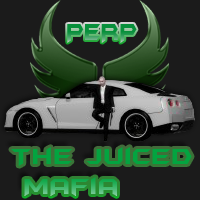
<style>
.page{position:relative;width:200px;height:200px;background:#1b1b1b}
.page>*{position:absolute;margin:0}
.t1{font:26px "BatmanForeverAlternate";color:#08903b;scale:0.82 1}
.t2{font:24.9px "BatmanForeverAlternate"}
</style>
<div class="page">
<p class="t1" style="left:67px;top:24px;width:70px;height:19px">PERP</p>
<p class="t2" style="left:11px;top:147px;width:181px;height:49px">The Juiced<br> MAfia</p>
</div>
